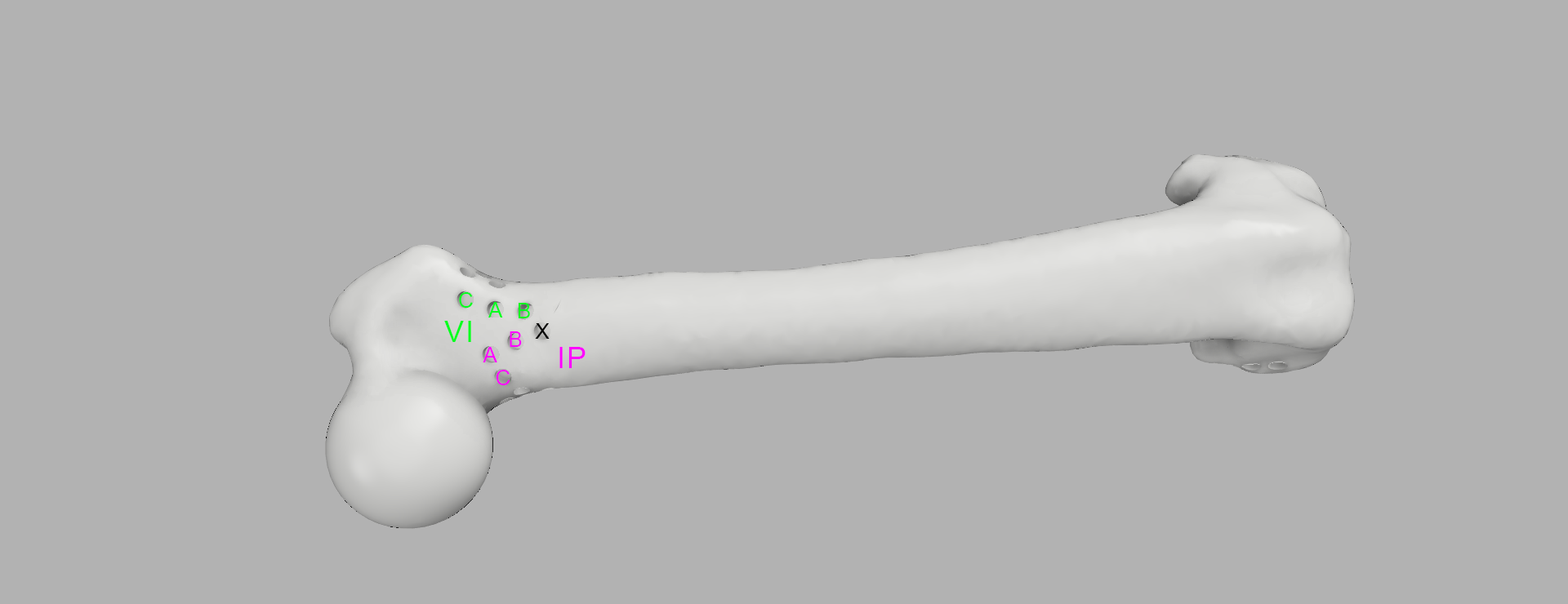
<style>
.page{position:relative;width:1568px;height:604px;background:#b2b2b2}
.page>*{position:absolute;margin:0}
.t1{font:21.2px "ArialMT";letter-spacing:0.06em;color:#00ff1e}
.t2{font:29.4px "ArialMT";letter-spacing:0.06em;color:#00ff1e}
.t3{font:21.2px "ArialMT";letter-spacing:0.06em;color:#000000}
.t4{font:21.2px "ArialMT";letter-spacing:0.06em;color:#ff00ff}
.t5{font:29.4px "ArialMT";letter-spacing:0.06em;color:#ff00ff}
</style>
<div class="page">
<p class="t1" style="left:459px;top:292px;width:14px;height:16px">C</p>
<p class="t1" style="left:488px;top:302px;width:15px;height:16px">A</p>
<p class="t1" style="left:519px;top:303px;width:11px;height:15px">B</p>
<p class="t2" style="left:444px;top:321px;width:27px;height:21px">VI</p>
<p class="t3" style="left:535px;top:323px;width:15px;height:16px">X</p>
<p class="t4" style="left:510px;top:332px;width:12px;height:15px">B</p>
<p class="t4" style="left:483px;top:347px;width:14px;height:16px">A</p>
<p class="t5" style="left:559px;top:347px;width:27px;height:21px">IP</p>
<p class="t4" style="left:496px;top:370px;width:14px;height:15px">C</p>
</div>
